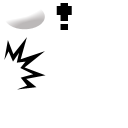
<style>
.page{position:relative;width:128px;height:128px;background:#ffffff}
.page>*{position:absolute;margin:0}
.t1{font:48px "Terminal";color:#000000}
</style>
<div class="page">
<p class="t1" style="left:56px;top:3px;width:16px;height:27px">!</p>
</div>
